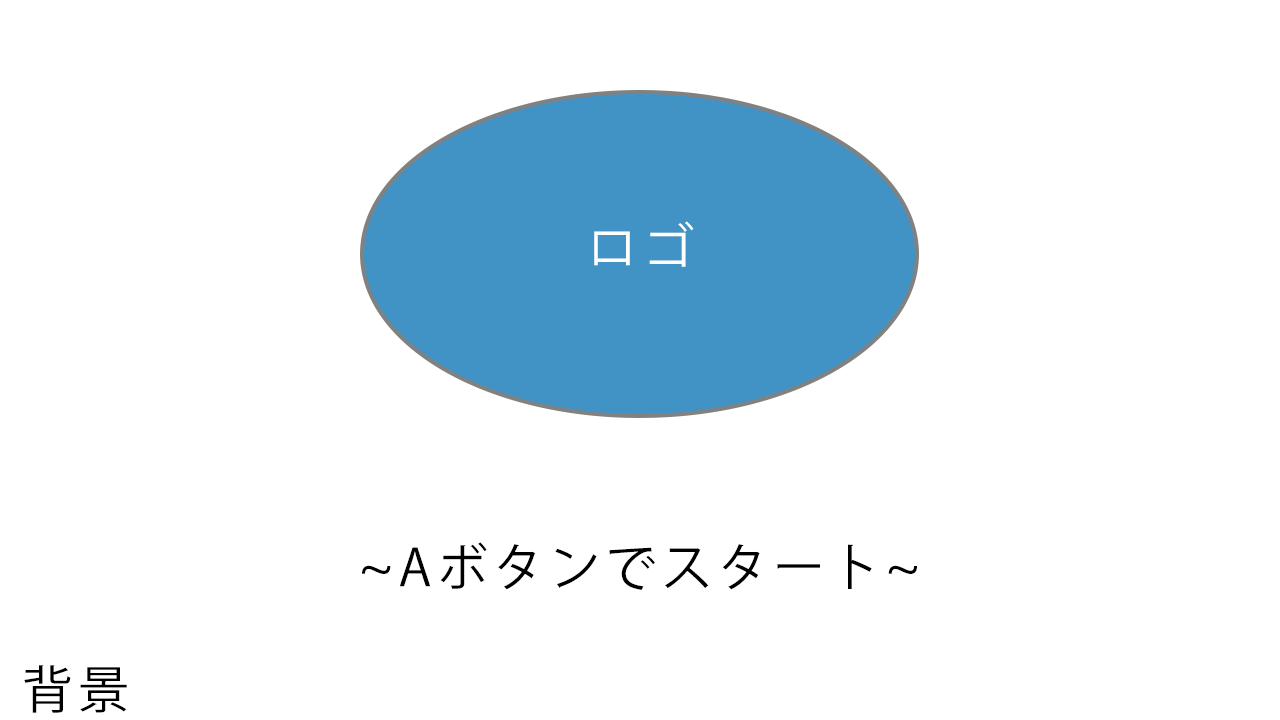
<style>
.page{position:relative;width:1280px;height:720px;background:#ffffff}
.page>*{position:absolute;margin:0}
.t1{font:51px "KozGoPr6N-Regular";letter-spacing:0.1em;color:#ffffff}
.t2{font:51px "KozGoPr6N-Regular";letter-spacing:0.1em;color:#000000}
</style>
<div class="page">
<p class="t1" style="left:594px;top:221px;width:100px;height:46px">ロゴ</p>
<p class="t2" style="left:362px;top:542px;width:555px;height:48px">~Aボタンでスタート~</p>
<p class="t2" style="left:24px;top:665px;width:103px;height:48px">背景</p>
</div>
